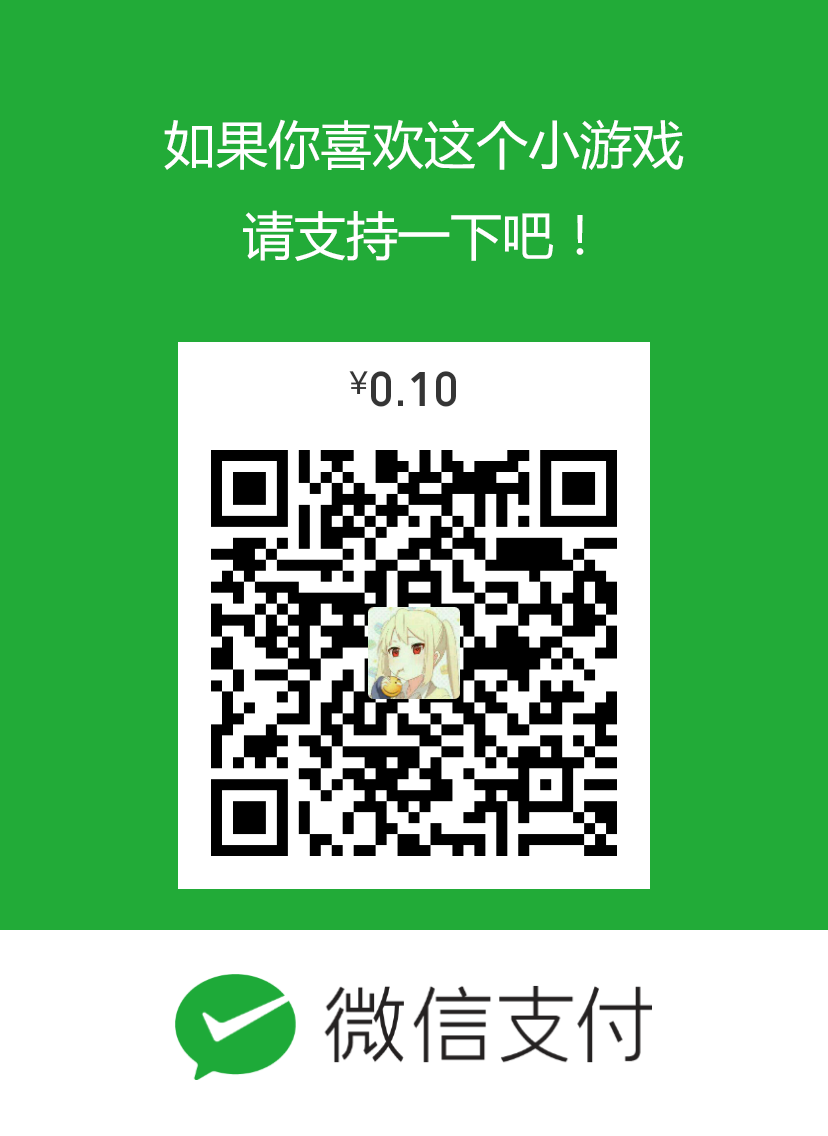
<style>
.page{position:relative;width:828px;height:1136px;background:#22ab38}
.page>*{position:absolute;margin:0}
.t1{font:51.7px "MicrosoftYaHei";color:#ffffff}
</style>
<div class="page">
<p class="t1" style="left:164px;top:119px;width:520px;height:142px;text-align:center">如果你喜欢这个小游戏<br>请支持一下吧！</p>
</div>
